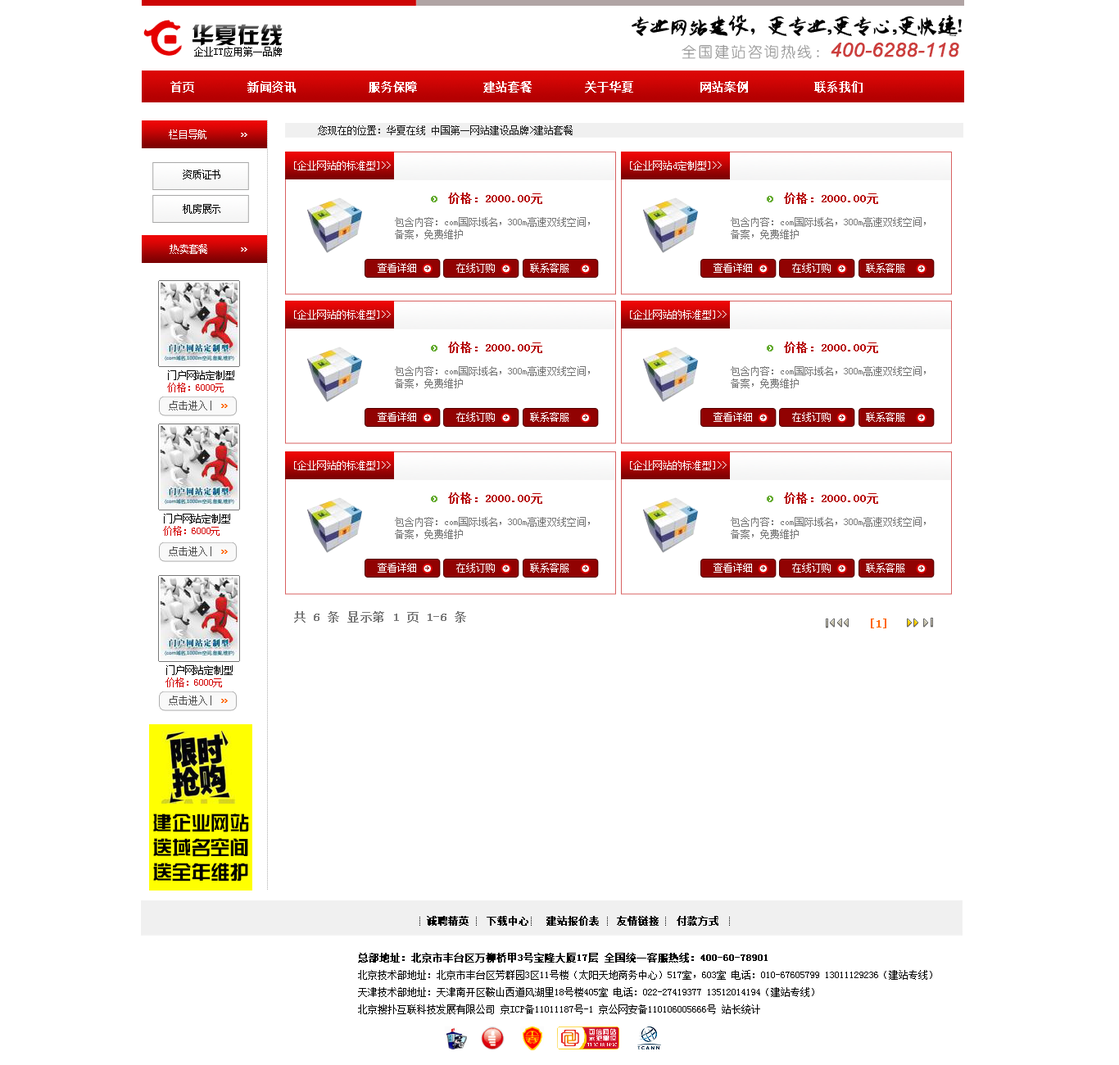
<style>
.page{position:relative;width:1119px;height:1065px;background:#ffffff}
.page>*{position:absolute;margin:0}
.t1{font:19.7px "Arial-ItalicMT";color:#cc3e3d;font-weight:bold}
.t2{font:14.8px "YouYuan";letter-spacing:0.12em;color:#8f8f8f}
.t3{font:11.5px "SimSun";color:#fffefe;font-weight:bold}
.t4{font:9.8px "SimSun";color:#1e1e1e}
.t5{font:9.8px "SimSun";letter-spacing:-0.02em;color:#ffffff}
.t6{font:9.8px "SimSun";color:#ffffff}
.t7{font:9.8px/34.4px "SimSun";letter-spacing:-0.02em;color:#010101}
.t8{font:11.5px "SimSun";color:#b50001;font-weight:bold}
.t9{font:9.8px/12.3px "SimSun";color:#787878}
.t10{font:9.8px/12.3px "SimSun";letter-spacing:-0.02em;color:#d20000}
.t11{font:9.8px/12.3px "SimSun";letter-spacing:-0.02em;color:#010101}
.t12{font:11.5px "SimSun";letter-spacing:0.04em;color:#787878;font-weight:bold}
.t13{font:11.5px "SimSun";letter-spacing:0.04em;color:#ff6600;font-weight:bold}
.t14{font:19.7px/24.6px "JZhongYi";letter-spacing:-0.02em;color:#010101}
.t15{font:9.8px "SimSun";color:#000000;font-weight:bold}
.t16{font:9.8px "SimSun";color:#000000}
</style>
<div class="page">
<p class="t1" style="left:682px;top:43px;width:278px;height:16px"><span class="t2">全国建站咨询热线：</span>400-6288-118</p>
<p class="t3" style="left:170px;top:81px;width:693px;height:12px">首页        新闻资讯           服务保障          建站套餐        关于华夏          网站案例          联系我们</p>
<p class="t4" style="left:318px;top:125px;width:255px;height:10px">您现在的位置：华夏在线 中国第一网站建设品牌&gt;建站套餐</p>
<p class="t5" style="left:169px;top:129px;width:38px;height:10px">栏目导航</p>
<p class="t6" style="left:294px;top:161px;width:97px;height:9px">[企业网站的标准型]&gt;&gt;</p>
<p class="t6" style="left:630px;top:161px;width:92px;height:9px">[企业网站d定制型]&gt;&gt;</p>
<p class="t7" style="left:183px;top:170px;width:37px;height:44px">资质证书<br>机房展示</p>
<p class="t8" style="left:448px;top:193px;width:94px;height:11px">价格：2000.00元</p>
<p class="t8" style="left:784px;top:193px;width:94px;height:11px">价格：2000.00元</p>
<p class="t9" style="left:395px;top:217px;width:195px;height:22px">包含内容：com国际域名，300m高速双线空间，<br>备案，免费维护</p>
<p class="t9" style="left:731px;top:217px;width:195px;height:22px">包含内容：com国际域名，300m高速双线空间，<br>备案，免费维护</p>
<p class="t5" style="left:170px;top:244px;width:37px;height:10px">热卖套餐</p>
<p class="t6" style="left:378px;top:263px;width:191px;height:10px">查看详细        在线订购       联系客服</p>
<p class="t6" style="left:714px;top:263px;width:191px;height:10px">查看详细        在线订购       联系客服</p>
<p class="t6" style="left:294px;top:310px;width:97px;height:10px">[企业网站的标准型]&gt;&gt;</p>
<p class="t6" style="left:630px;top:310px;width:97px;height:10px">[企业网站的标准型]&gt;&gt;</p>
<p class="t8" style="left:448px;top:342px;width:94px;height:11px">价格：2000.00元</p>
<p class="t8" style="left:784px;top:342px;width:94px;height:11px">价格：2000.00元</p>
<p class="t10" style="left:167px;top:370px;width:67px;height:23px"><span class="t11">门户网站定制型<br></span>价格：6000元</p>
<p class="t9" style="left:395px;top:366px;width:195px;height:22px">包含内容：com国际域名，300m高速双线空间，<br>备案，免费维护</p>
<p class="t9" style="left:731px;top:366px;width:195px;height:22px">包含内容：com国际域名，300m高速双线空间，<br>备案，免费维护</p>
<p class="t6" style="left:378px;top:412px;width:191px;height:10px">查看详细        在线订购       联系客服</p>
<p class="t6" style="left:714px;top:412px;width:191px;height:10px">查看详细        在线订购       联系客服</p>
<p class="t6" style="left:294px;top:461px;width:97px;height:9px">[企业网站的标准型]&gt;&gt;</p>
<p class="t6" style="left:630px;top:461px;width:97px;height:9px">[企业网站的标准型]&gt;&gt;</p>
<p class="t8" style="left:448px;top:492px;width:94px;height:12px">价格：2000.00元</p>
<p class="t8" style="left:784px;top:492px;width:94px;height:12px">价格：2000.00元</p>
<p class="t10" style="left:163px;top:514px;width:67px;height:22px"><span class="t11">门户网站定制型<br></span>价格：6000元</p>
<p class="t9" style="left:395px;top:517px;width:195px;height:22px">包含内容：com国际域名，300m高速双线空间，<br>备案，免费维护</p>
<p class="t9" style="left:731px;top:517px;width:195px;height:22px">包含内容：com国际域名，300m高速双线空间，<br>备案，免费维护</p>
<p class="t6" style="left:378px;top:563px;width:191px;height:10px">查看详细        在线订购       联系客服</p>
<p class="t6" style="left:714px;top:563px;width:191px;height:10px">查看详细        在线订购       联系客服</p>
<p class="t12" style="left:294px;top:611px;width:172px;height:12px">共 6 条 显示第 1 页 1-6 条</p>
<p class="t13" style="left:871px;top:619px;width:16px;height:10px">[1]</p>
<p class="t10" style="left:166px;top:665px;width:67px;height:23px"><span class="t11">门户网站定制型<br></span>价格：6000元</p>
<p class="t14" style="left:153px;top:814px;width:96px;height:68px">建企业网站<br>送域名空间<br>送全年维护</p>
<p class="t15" style="left:427px;top:916px;width:292px;height:10px">诚聘精英   下载中心   建站报价表   友情链接   付款方式</p>
<p class="t16" style="left:358px;top:953px;width:575px;height:61px"><span class="t15">   <br> <br><br>总部地址：北京市丰台区万柳桥甲3号宝隆大厦17层 全国统一客服热线：400-60-78901<br></span>北京技术部地址：北京市丰台区芳群园3区11号楼（太阳天地商务中心）517室，603室 电话：010-67605799 13011129236（建站专线）<br>天津技术部地址：天津南开区鞍山西道风湖里18号楼405室 电话：022-27419377 13512014194（建站专线）<br>北京搜扑互联科技发展有限公司 京ICP备11011187号-1 京公网安备110106005666号 站长统计</p>
</div>
